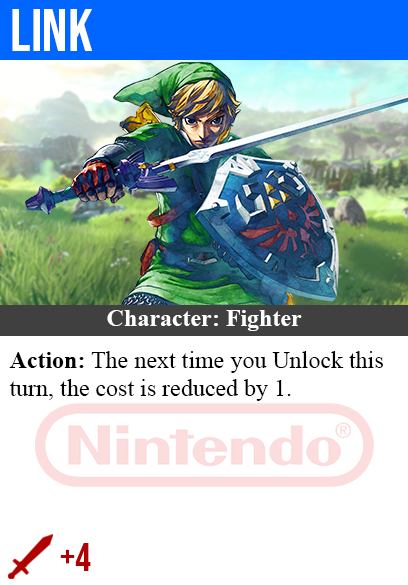
<style>
.page{position:relative;width:408px;height:585px;background:#ffffff}
.page>*{position:absolute;margin:0}
.t1{font:60px "BebasNeue-Regular";color:#ffffff}
.t2{font:24px "TimesNewRomanPS-BoldMT";color:#ffffff}
.t3{font:24px "TimesNewRomanPSMT";color:#000000}
.t4{font:24px "TimesNewRomanPS-BoldMT";color:#000000}
.t5{font:40px "BebasNeue-Regular";color:#af0202}
</style>
<div class="page">
<p class="t1" style="left:12px;top:9px;width:80px;height:42px">link</p>
<p class="t2" style="left:107px;top:310px;width:195px;height:21px">Character: Fighter</p>
<p class="t3" style="left:9px;top:351px;width:374px;height:50px"><span class="t4">Action:</span> The next time you Unlock this<br>turn, the cost is reduced by 1.</p>
<p class="t5" style="left:60px;top:543px;width:31px;height:28px">+4</p>
</div>
